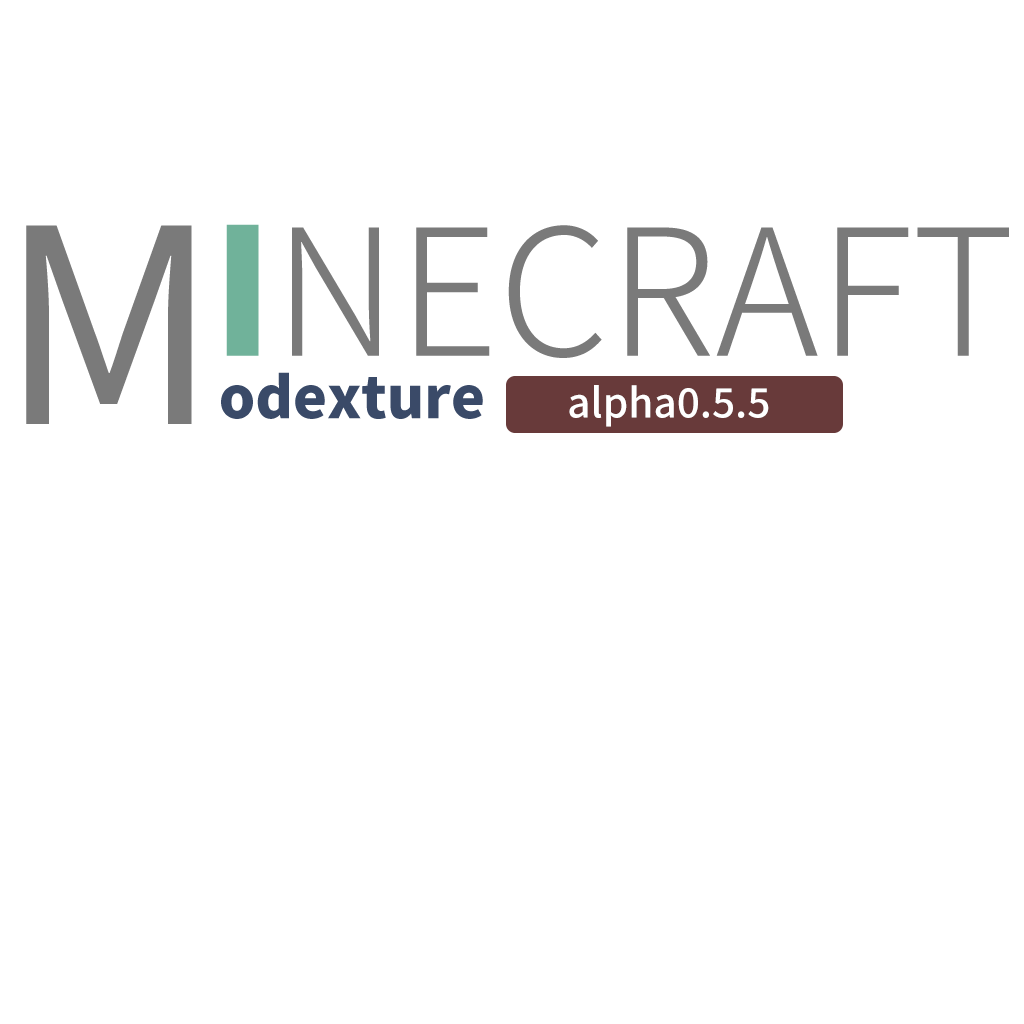
<style>
.page{position:relative;width:1024px;height:1024px;background:#ffffff}
.page>*{position:absolute;margin:0}
.t1{font:270.4px "SourceHanSansSC-Regular";color:#7a7a7a}
.t2{font:175.7px "SourceHanSansSC-Light";color:#7a7a7a}
.t3{font:175.7px "SourceHanSansSC-Heavy";color:#70b29a}
.t4{font:57.3px "SourceHanSansSC-Heavy";color:#3a4a68}
.t5{font:40.6px "SourceHanSansSC-Medium";color:#ffffff}
</style>
<div class="page">
<p class="t1" style="left:26px;top:225px;width:166px;height:199px">M</p>
<p class="t2" style="left:226px;top:224px;width:783px;height:134px"><span class="t3">I</span>NECRAFT</p>
<p class="t4" style="left:221px;top:372px;width:262px;height:47px">odexture</p>
<p class="t5" style="left:569px;top:385px;width:200px;height:42px">alpha0.5.5</p>
</div>
